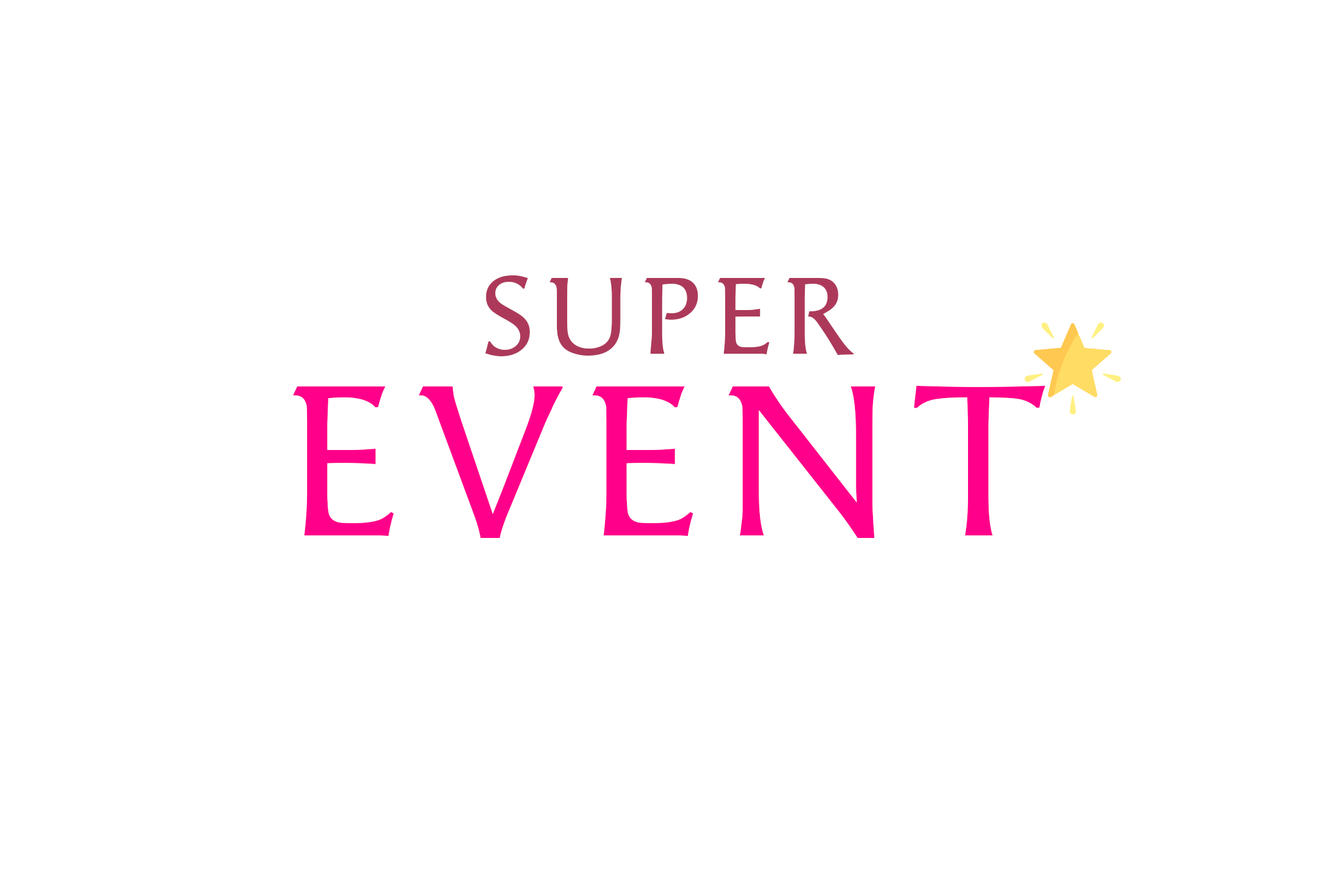
<style>
.page{position:relative;width:1338px;height:891px;background:#ffffff}
.page>*{position:absolute;margin:0}
.t1{font:109.2px "SFUAngie";letter-spacing:0.1em;color:#ad395a;text-transform:uppercase}
.t2{font:214.1px "SFUAngie";letter-spacing:0.1em;color:#ff008a;text-transform:uppercase}
</style>
<div class="page">
<p class="t1" style="left:485px;top:276px;width:368px;height:80px">Super</p>
<p class="t2" style="left:293px;top:386px;width:753px;height:152px">Event</p>
</div>
